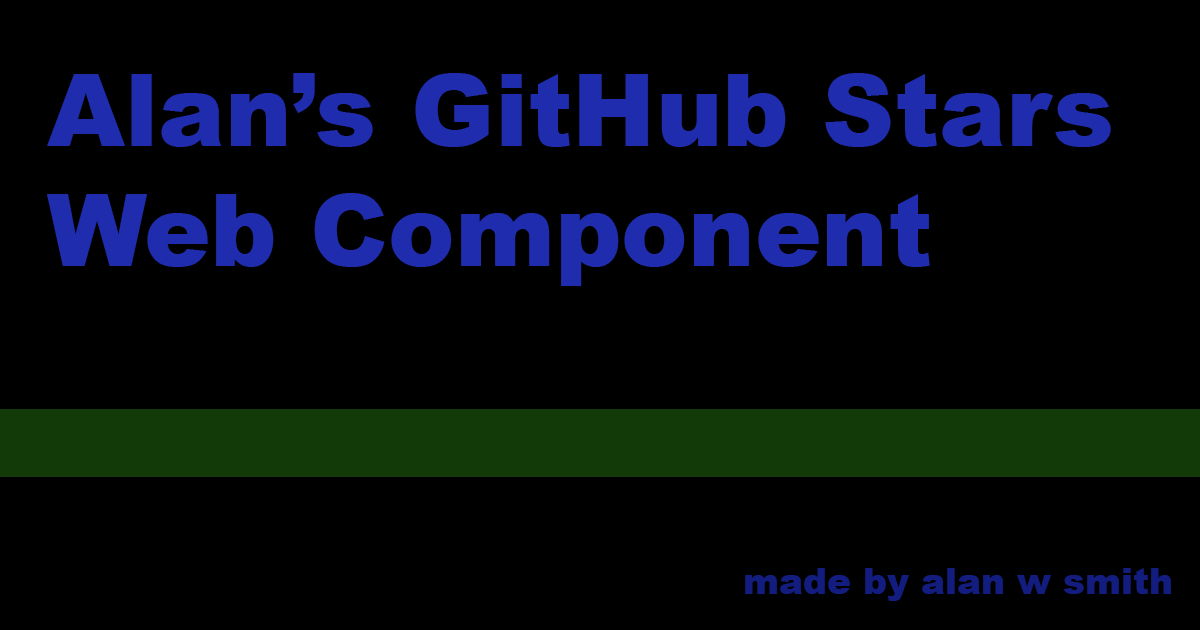
<style>
.page{position:relative;width:1200px;height:630px;background:#000000}
.page>*{position:absolute;margin:0}
.t1{font:100px "Arial-Black";color:#1f2cad}
.t2{font:36px "Arial-Black";color:#131d80}
</style>
<div class="page">
<p class="t1" style="left:47px;top:73px;width:1064px;height:213px">Alan’s GitHub Stars<br>Web Component</p>
<p class="t2" style="left:745px;top:568px;width:426px;height:33px">made by alan w smith</p>
</div>
